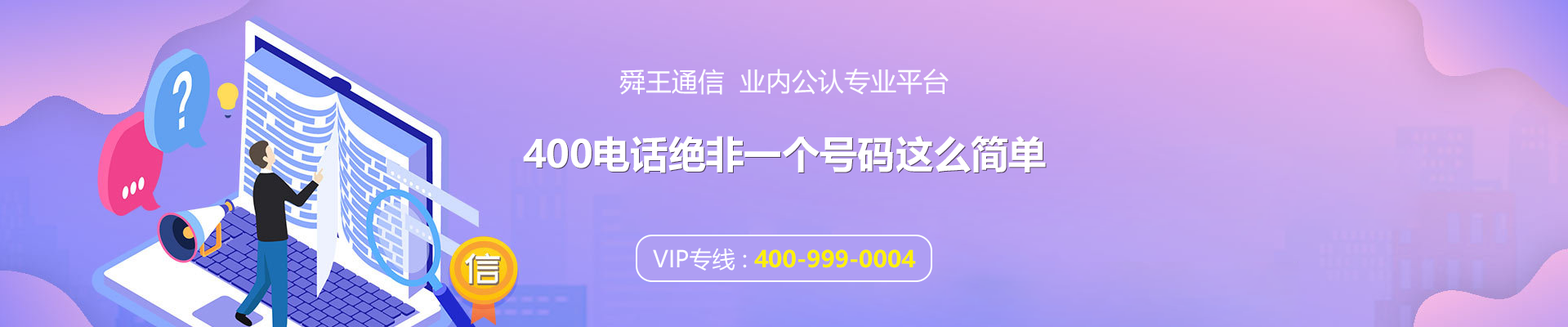
<style>
.page{position:relative;width:1568px;height:327px}
.page>*{position:absolute;margin:0}
.t1{font:26.2px "MicrosoftYaHei";color:#ffffff;text-transform:uppercase}
.t2{font:37.8px "MicrosoftYaHei-Bold";color:#ffffff;text-transform:uppercase}
.t3{font:22.9px "MicrosoftYaHei-Bold";color:#fff100;text-transform:uppercase}
.t4{font:22.9px "MicrosoftYaHei";color:#ffffff;text-transform:uppercase}
</style>
<div class="page">
<p class="t1" style="left:619px;top:69px;width:330px;height:26px">舜王通信  业内公认专业平台</p>
<p class="t2" style="left:523px;top:136px;width:523px;height:37px">400电话绝非一个号码这么简单</p>
<p class="t3" style="left:653px;top:248px;width:263px;height:22px"><span class="t4">VIP专线 : </span>400-999-0004</p>
</div>
